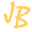
<style>
.page{position:relative;width:32px;height:32px;background:#ffffff}
.page>*{position:absolute;margin:0}
.t1{font:30px "Staccato222BT-Regular";color:#ffcc66}
</style>
<div class="page">
<p class="t1" style="left:4px;top:1px;width:11px;height:23px">J</p>
<p class="t1" style="left:13px;top:6px;width:18px;height:23px;rotate:6deg">B</p>
</div>
